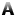
<style>
.page{position:relative;width:16px;height:16px;background:#ffffff}
.page>*{position:absolute;margin:0}
.t1{font:18px "Tahoma-Bold"}
</style>
<div class="page">
<p class="t1" style="left:1px;top:2px;width:14px;height:13px">A</p>
</div>
